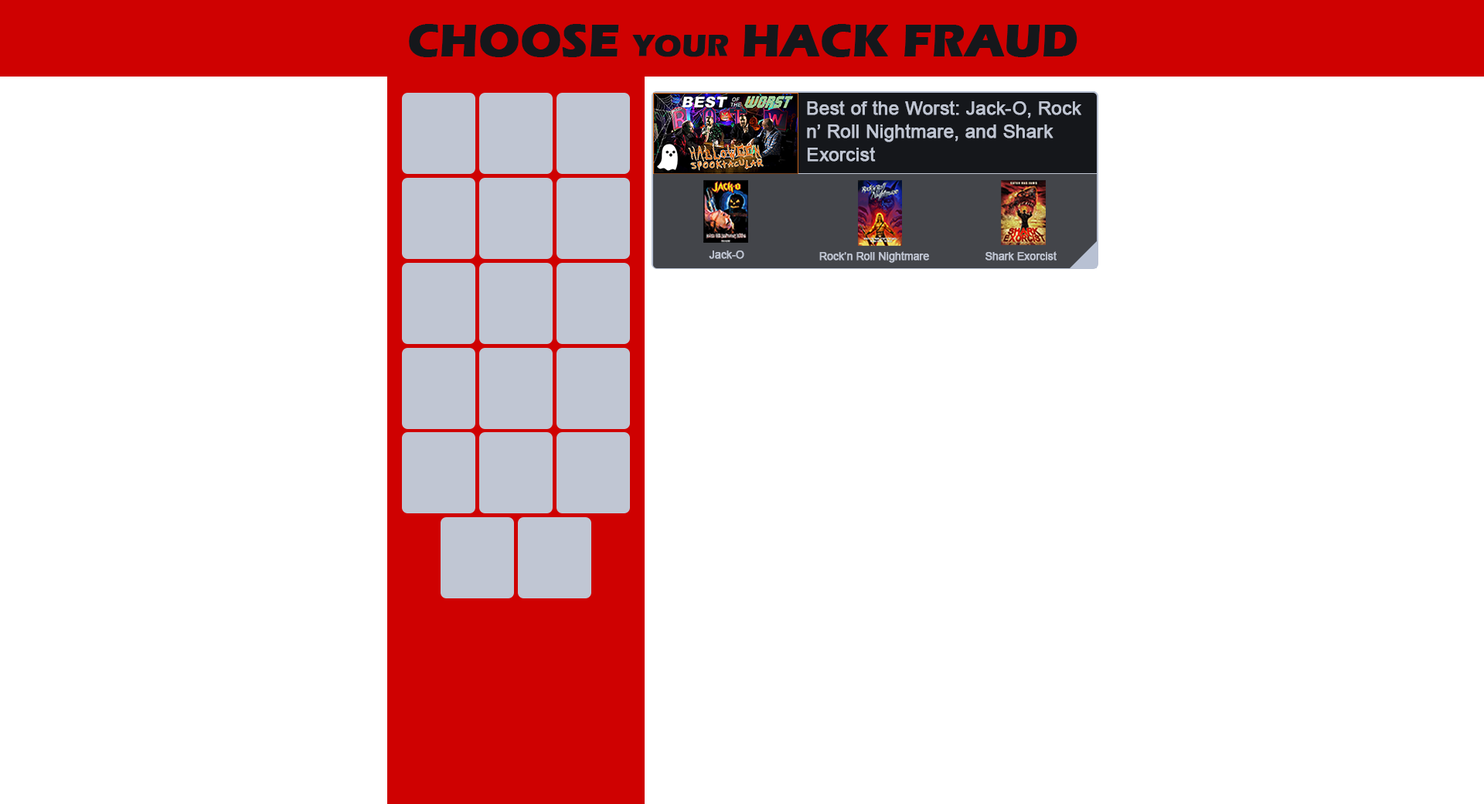
<style>
.page{position:relative;width:1484px;height:804px;background:#ffffff}
.page>*{position:absolute;margin:0}
.t1{font:46.4px "ErasITC-Bold";color:#15171b;text-transform:uppercase;font-weight:bold}
.t2{font:30.9px "ErasITC-Bold";color:#15171b;text-transform:uppercase;font-weight:bold}
.t3{font:18.5px/23.2px "ArialMT";color:#c0c6d3;font-weight:bold}
.t4{font:10.4px "ArialMT";color:#c0c6d3;font-weight:bold}
</style>
<div class="page">
<p class="t1" style="left:409px;top:24px;width:668px;height:33px">Choose <span class="t2">Your</span> Hack Fraud</p>
<p class="t3" style="left:807px;top:100px;width:274px;height:62px">Best of the Worst: Jack-O, Rock n’ Roll Nightmare, and Shark Exorcist</p>
<p class="t3" style="left:807px;top:100px;width:274px;height:62px">Best of the Worst: Jack-O, Rock n’ Roll Nightmare, and Shark Exorcist</p>
<p class="t4" style="left:709px;top:250px;width:35px;height:9px">Jack-O</p>
<p class="t4" style="left:819px;top:251px;width:110px;height:12px">Rock’n Roll Nightmare</p>
<p class="t4" style="left:985px;top:251px;width:71px;height:9px">Shark Exorcist</p>
</div>
